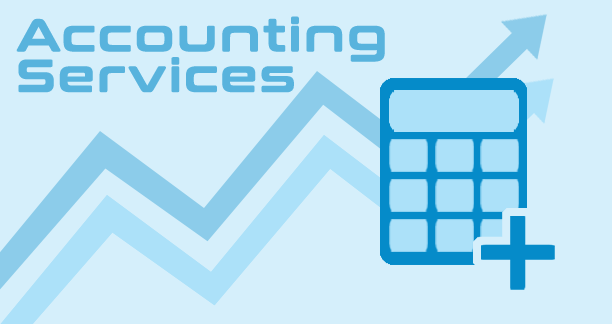
<style>
.page{position:relative;width:612px;height:324px;background:#d5effb}
.page>*{position:absolute;margin:0}
.t1{font:44.9px/40.6px "ConthraxSb-Regular";letter-spacing:0.05em;color:#58b3dd;font-weight:bold}
</style>
<div class="page">
<p class="t1" style="left:16px;top:16px;width:369px;height:77px">Accounting<br>Services</p>
</div>
